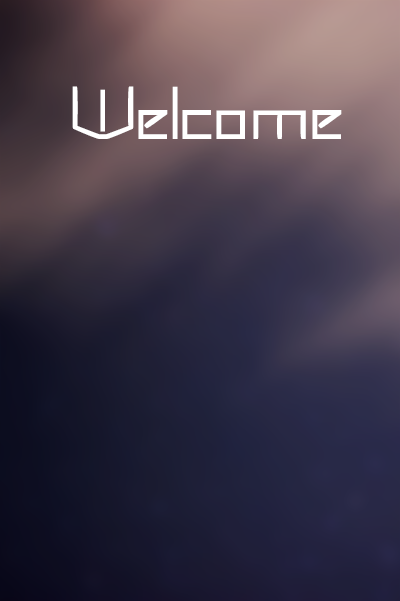
<style>
.page{position:relative;width:400px;height:601px}
.page>*{position:absolute;margin:0}
.t1{font:88.1px "FZZHYK--GBK1-0";color:#ffffff}
</style>
<div class="page">
<p class="t1" style="left:72px;top:86px;width:270px;height:53px">Welcome</p>
</div>
